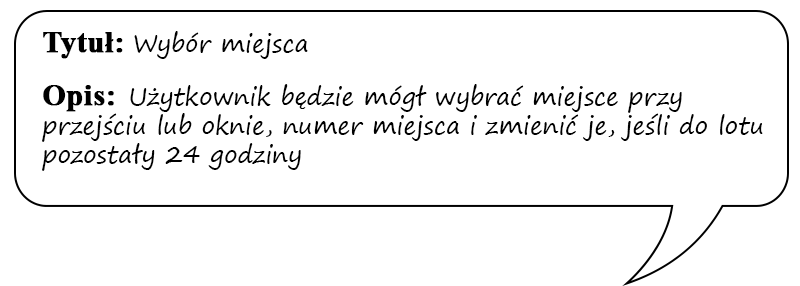
<style>
.page{position:relative;width:800px;height:286px;background:#ffffff}
.page>*{position:absolute;margin:0}
.t1{font:24px "SegoePrint";color:#000000}
.t2{font:30px "TimesNewRomanPS-BoldMT";color:#000000;font-weight:bold}
</style>
<div class="page">
<p class="t1" style="left:42px;top:31px;width:721px;height:140px"><span class="t2">Tytuł: </span>Wybór miejsca<br><br><span class="t2">Opis:  </span>Użytkownik będzie mógł wybrać miejsce przy przejściu lub oknie, numer miejsca i zmienić je, jeśli do lotu pozostały 24 godziny</p>
</div>
